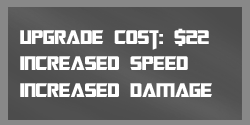
<style>
.page{position:relative;width:250px;height:125px}
.page>*{position:absolute;margin:0}
.t1{font:22px "TransformersMovie";color:#ffffff}
</style>
<div class="page">
<p class="t1" style="left:20px;top:28px;width:192px;height:69px">upgrade cost: $22<br>increased speed<br>increased damage</p>
</div>
